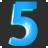
<style>
.page{position:relative;width:48px;height:48px;background:#2e2e2e}
.page>*{position:absolute;margin:0}
.t1{font:55.8px "AdobeHeitiStd-Regular";color:#1eaafe;font-weight:bold}
</style>
<div class="page">
<p class="t1" style="left:10px;top:1px;width:28px;height:45px">5</p>
</div>
